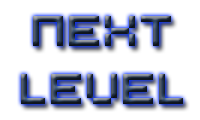
<style>
.page{position:relative;width:200px;height:120px;background:#ffffff}
.page>*{position:absolute;margin:0}
.t1{font:48px "Hooge0553"}
</style>
<div class="page">
<p class="t1" style="left:21px;top:16px;width:162px;height:88px;text-align:center">next<br>level</p>
</div>
